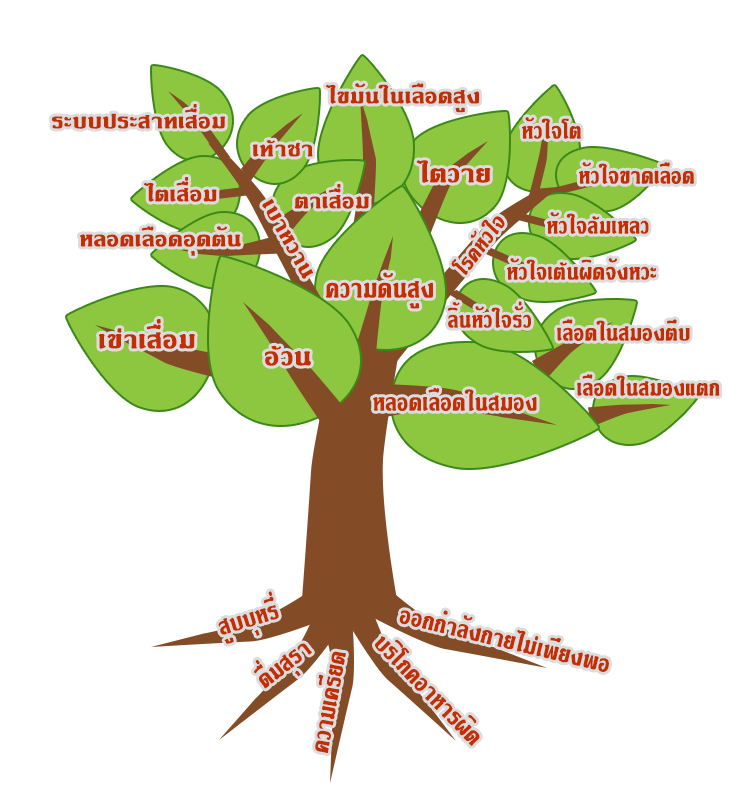
<style>
.page{position:relative;width:739px;height:799px;background:#ffffff}
.page>*{position:absolute;margin:0}
.t1{font:30px "DSNSukSaWat";letter-spacing:0.02em;color:#c12f02}
.t2{font:32px "DSNSukSaWat";letter-spacing:0.02em;color:#c12f02;scale:0.79 1}
.t3{font:36px "DSNSukSaWat";letter-spacing:0.02em;color:#c12f02}
.t4{font:30.8px "DSNSukSaWat";letter-spacing:0.02em;color:#c12f02;scale:0.81 1}
.t5{font:37.4px "DSNSukSaWat";letter-spacing:0.02em;color:#c12f02;scale:0.79 1}
.t6{font:34px "DSNSukSaWat";letter-spacing:0.02em;color:#c12f02;scale:0.79 1}
.t7{font:34.2px "DSNSukSaWat";letter-spacing:0.02em;color:#c12f02;scale:0.78 1}
</style>
<div class="page">
<p class="t1" style="left:326px;top:83px;width:153px;height:30px">ไขมันในเลือดสูง</p>
<p class="t1" style="left:51px;top:104px;width:175px;height:25px">ระบบประสาทเสื่อม</p>
<p class="t2" style="left:522px;top:117px;width:59px;height:22px">หัวใจโต</p>
<p class="t1" style="left:252px;top:140px;width:61px;height:17px">เท้าชา</p>
<p class="t3" style="left:416px;top:160px;width:75px;height:23px">ไตวาย</p>
<p class="t2" style="left:579px;top:162px;width:115px;height:22px">หัวใจขาดเลือด</p>
<p class="t1" style="left:144px;top:177px;width:73px;height:25px">ไตเสื่อม</p>
<p class="t1" style="left:294px;top:184px;width:75px;height:25px">ตาเสื่อม</p>
<p class="t1" style="left:262px;top:199px;width:51px;height:80px;rotate:61deg">เบาหวาน</p>
<p class="t4" style="left:451px;top:216px;width:54px;height:59px;rotate:-53deg">โรคหัวใจ</p>
<p class="t2" style="left:547px;top:212px;width:102px;height:22px">หัวใจล้มเหลว</p>
<p class="t1" style="left:79px;top:226px;width:162px;height:30px">หลอดเลือดอุดตัน</p>
<p class="t2" style="left:507px;top:258px;width:150px;height:22px">หัวใจเต้นผิดจังหวะ</p>
<p class="t5" style="left:326px;top:272px;width:107px;height:37px">ความดันสูง</p>
<p class="t2" style="left:447px;top:301px;width:84px;height:27px">ลิ้นหัวใจรั่ว</p>
<p class="t3" style="left:99px;top:319px;width:96px;height:30px">เข่าเสื่อม</p>
<p class="t2" style="left:557px;top:319px;width:133px;height:22px">เลือดในสมองตีบ</p>
<p class="t3" style="left:265px;top:345px;width:46px;height:21px">อ้วน</p>
<p class="t2" style="left:577px;top:374px;width:143px;height:22px">เลือดในสมองแตก</p>
<p class="t6" style="left:373px;top:388px;width:164px;height:23px">หลอดเลือดในสมอง</p>
<p class="t7" style="left:218px;top:591px;width:61px;height:53px;rotate:-17deg">สูบบุหรี่</p>
<p class="t6" style="left:399px;top:610px;width:210px;height:62px;rotate:14deg">ออกกำลังกายไม่เพียงพอ</p>
<p class="t6" style="left:375px;top:636px;width:105px;height:110px;rotate:46deg">บริโภคอาหารผิด</p>
<p class="t6" style="left:254px;top:643px;width:58px;height:46px;rotate:-38deg">ดื่มสุรา</p>
<p class="t6" style="left:315px;top:651px;width:31px;height:103px;rotate:-80deg">ความเครียด</p>
</div>
